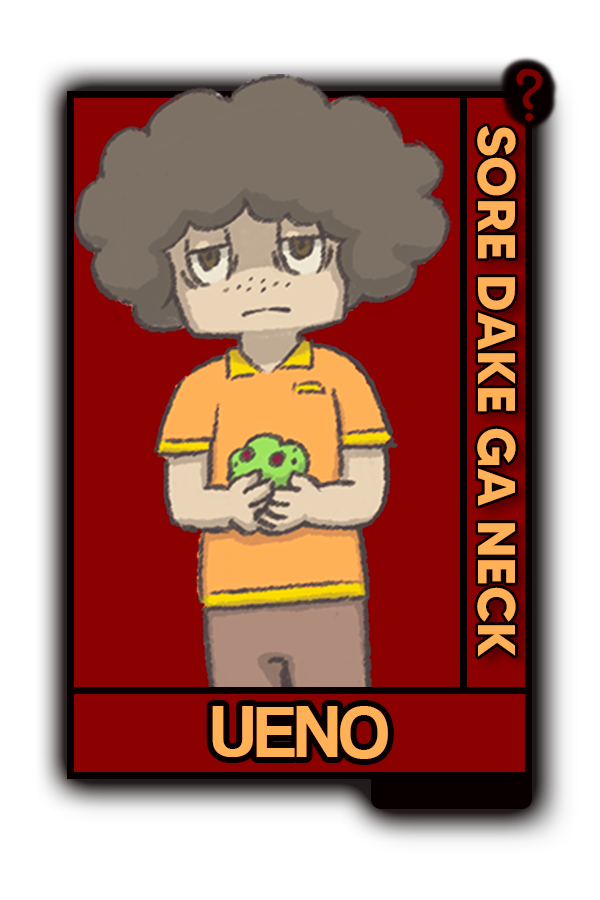
<style>
.page{position:relative;width:600px;height:900px;background:#8b0000}
.page>*{position:absolute;margin:0}
.t1{font:52.7px "MADETOMMY-Bold";color:#ffb158}
.t2{font:75px "CoolveticaRg-Regular";color:#ffb158}
</style>
<div class="page">
<p class="t1" style="left:477px;top:126px;width:39px;height:531px;rotate:90deg">SORE DAKE GA NECK</p>
<p class="t2" style="left:212px;top:706px;width:176px;height:53px">UENO</p>
</div>
